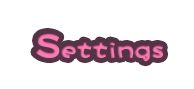
<style>
.page{position:relative;width:194px;height:89px;background:#ffffff}
.page>*{position:absolute;margin:0}
.t1{font:25px "DFPHaiBaoW12";letter-spacing:-0.005em}
.t2{font:37.5px "DFPHaiBaoW12";letter-spacing:-0.005em}
</style>
<div class="page">
<p class="t1" style="left:35px;top:33px;width:128px;height:29px"><span class="t2">S</span>ettings</p>
</div>
